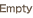
<style>
.page{position:relative;width:33px;height:18px;background:#ffffff}
.page>*{position:absolute;margin:0}
.t1{font:10px "GothicMB101Pro-DeBold";letter-spacing:-0.04em;color:#685747}
</style>
<div class="page">
<p class="t1" style="left:0px;top:4px;width:33px;height:10px">Empty</p>
</div>
